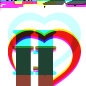
<style>
.page{position:relative;width:86px;height:86px;background:#ffffff}
.page>*{position:absolute;margin:0}
.t1{font:60px "StencilStd"}
</style>
<div class="page">
<p class="t1" style="left:12px;top:29px;width:45px;height:45px">H</p>
</div>
